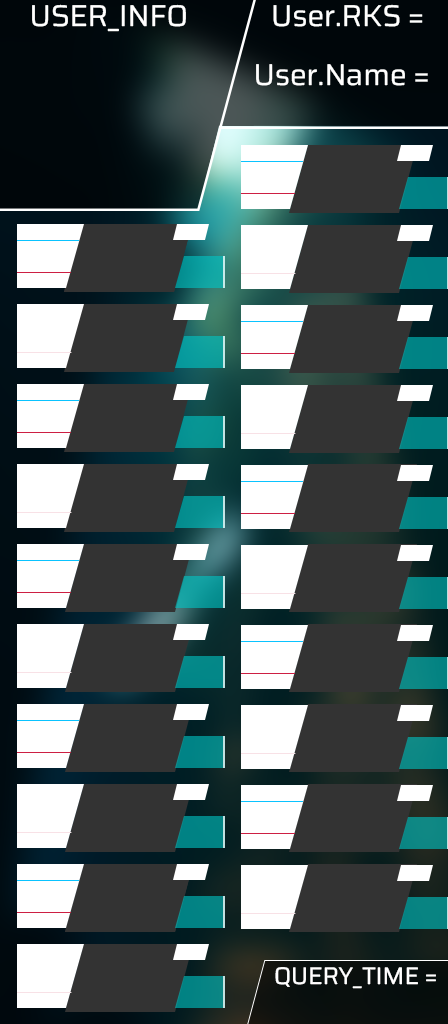
<style>
.page{position:relative;width:448px;height:1024px;background:#333333}
.page>*{position:absolute;margin:0}
.t1{font:30px "SairaRoman-Regular";color:#ffffff}
.t2{font:24px "SairaRoman-Regular";color:#ffffff}
</style>
<div class="page">
<p class="t1" style="left:32px;top:4px;width:154px;height:28px">USER_INFO</p>
<p class="t1" style="left:273px;top:4px;width:150px;height:23px">User.RKS =</p>
<p class="t1" style="left:256px;top:64px;width:172px;height:22px">User.Name =</p>
<p class="t2" style="left:275px;top:967px;width:161px;height:22px">QUERY_TIME =</p>
</div>
